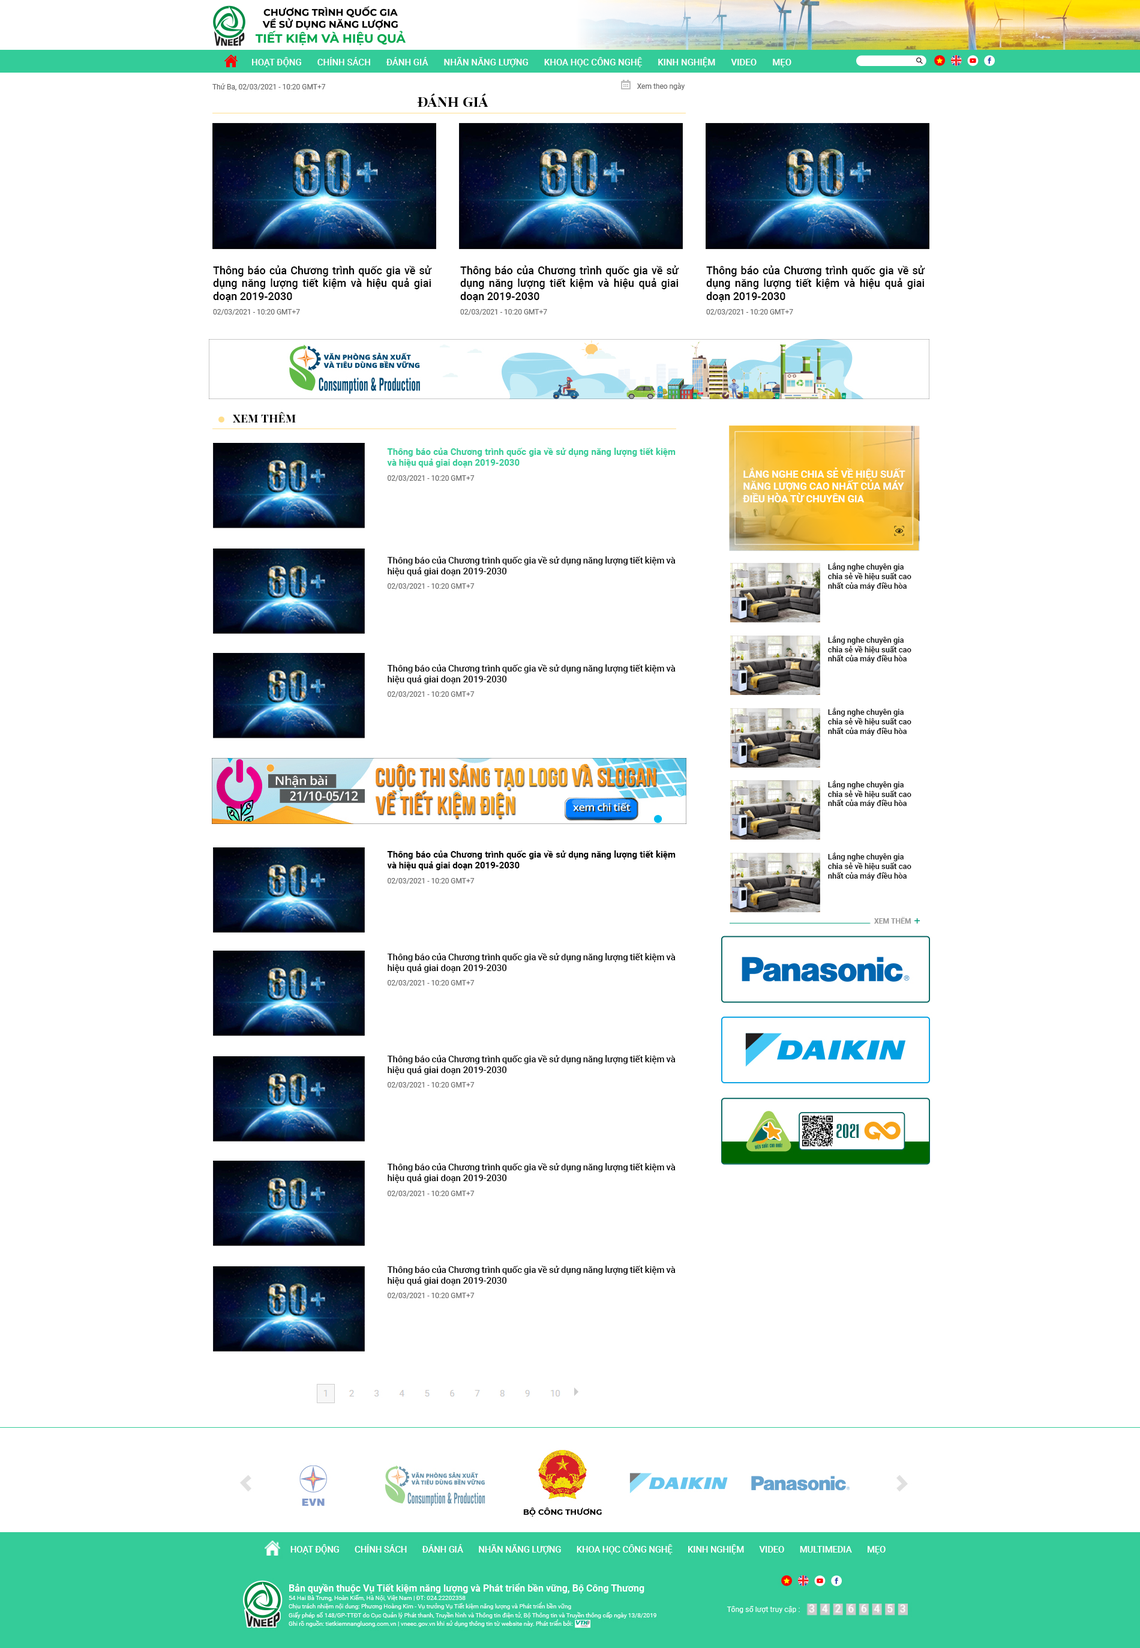
<style>
.page{position:relative;width:1140px;height:1648px;background:#ffffff}
.page>*{position:absolute;margin:0}
.t1{font:9px "Roboto-Medium";color:#ffffff;text-transform:uppercase}
.t2{font:7.2px "Roboto-Regular";color:#666666}
.t3{font:15px "PlayfairDisplaySC-Bold";color:#000000}
.t4{font:10.8px "Roboto-Medium";color:#000000}
.t5{font:12px "PlayfairDisplaySC-Bold";color:#000000}
.t6{font:9px "Roboto-Bold";color:#33cc99}
.t7{font:9px "Roboto-Medium";color:#000000}
.t8{font:10px/12.5px "Roboto-Bold";color:#ffffff}
.t9{font:7.8px "Roboto-Medium";color:#000000}
.t10{font:9px "Roboto-Bold";color:#000000}
</style>
<div class="page">
<p class="t1" style="left:252px;top:57px;width:539px;height:10px">Hoạt động       Chính sách       Đánh giá       Nhãn năng lượng       Khoa học công nghệ       Kinh nghiệm       Video       Mẹo</p>
<p class="t2" style="left:212px;top:83px;width:114px;height:8px">Thứ Ba, 02/03/2021 - 10:20 GMT+7</p>
<p class="t2" style="left:637px;top:83px;width:48px;height:7px">Xem theo ngày</p>
<p class="t3" style="left:417px;top:94px;width:71px;height:13px">đánh giá</p>
<p class="t4" style="left:213px;top:265px;width:219px;height:50px;text-align:justify">Thông báo của Chương trình quốc gia về sử dụng năng lượng tiết kiệm và hiệu quả giai doạn 2019-2030<br><span class="t2">02/03/2021 - 10:20 GMT+7</span></p>
<p class="t4" style="left:460px;top:265px;width:219px;height:50px;text-align:justify">Thông báo của Chương trình quốc gia về sử dụng năng lượng tiết kiệm và hiệu quả giai doạn 2019-2030<br><span class="t2">02/03/2021 - 10:20 GMT+7</span></p>
<p class="t4" style="left:706px;top:265px;width:219px;height:50px;text-align:justify">Thông báo của Chương trình quốc gia về sử dụng năng lượng tiết kiệm và hiệu quả giai doạn 2019-2030<br><span class="t2">02/03/2021 - 10:20 GMT+7</span></p>
<p class="t5" style="left:233px;top:412px;width:63px;height:10px">xem thêm</p>
<p class="t6" style="left:387px;top:448px;width:289px;height:249px;text-align:justify">Thông báo của Chương trình quốc gia về sử dụng năng lượng tiết kiệm và hiệu quả giai doạn 2019-2030<br><span class="t2">02/03/2021 - 10:20 GMT+7<br></span><span class="t7">Thông báo của Chương trình quốc gia về sử dụng năng lượng tiết kiệm và hiệu quả giai doạn 2019-2030<br></span><span class="t2">02/03/2021 - 10:20 GMT+7<br></span><span class="t7">Thông báo của Chương trình quốc gia về sử dụng năng lượng tiết kiệm và hiệu quả giai doạn 2019-2030<br></span><span class="t2">02/03/2021 - 10:20 GMT+7</span></p>
<p class="t8" style="left:743px;top:467px;width:162px;height:35px">LẮNG NGHE CHIA SẺ VỀ HIỆU SUẤT NĂNG LƯỢNG CAO NHẤT CỦA MÁY ĐIỀU HÒA TỪ CHUYÊN GIA</p>
<p class="t9" style="left:828px;top:562px;width:83px;height:28px">Lắng nghe chuyên gia chia sẻ về hiệu suất cao nhất của máy điều hòa</p>
<p class="t9" style="left:828px;top:635px;width:83px;height:28px">Lắng nghe chuyên gia chia sẻ về hiệu suất cao nhất của máy điều hòa</p>
<p class="t9" style="left:828px;top:707px;width:83px;height:29px">Lắng nghe chuyên gia chia sẻ về hiệu suất cao nhất của máy điều hòa</p>
<p class="t9" style="left:828px;top:780px;width:83px;height:28px">Lắng nghe chuyên gia chia sẻ về hiệu suất cao nhất của máy điều hòa</p>
<p class="t10" style="left:387px;top:850px;width:289px;height:448px;text-align:justify">Thông báo của Chương trình quốc gia về sử dụng năng lượng tiết kiệm và hiệu quả giai doạn 2019-2030<br><span class="t2">02/03/2021 - 10:20 GMT+7<br></span><span class="t7">Thông báo của Chương trình quốc gia về sử dụng năng lượng tiết kiệm và hiệu quả giai doạn 2019-2030<br></span><span class="t2">02/03/2021 - 10:20 GMT+7<br></span><span class="t7">Thông báo của Chương trình quốc gia về sử dụng năng lượng tiết kiệm và hiệu quả giai doạn 2019-2030<br></span><span class="t2">02/03/2021 - 10:20 GMT+7<br></span><span class="t7">Thông báo của Chương trình quốc gia về sử dụng năng lượng tiết kiệm và hiệu quả giai doạn 2019-2030<br></span><span class="t2">02/03/2021 - 10:20 GMT+7<br></span><span class="t7">Thông báo của Chương trình quốc gia về sử dụng năng lượng tiết kiệm và hiệu quả giai doạn 2019-2030<br></span><span class="t2">02/03/2021 - 10:20 GMT+7</span></p>
<p class="t9" style="left:828px;top:852px;width:83px;height:28px">Lắng nghe chuyên gia chia sẻ về hiệu suất cao nhất của máy điều hòa</p>
</div>
